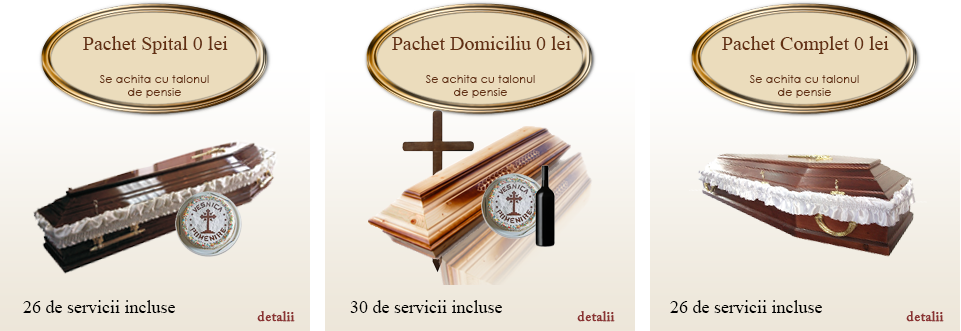
<style>
.page{position:relative;width:961px;height:331px}
.page>*{position:absolute;margin:0}
.t1{font:20px "TimesNewRomanPSMT";color:#633012}
.t2{font:11.3px "CenturyGothic";color:#633012}
.t3{font:18px "TimesNewRomanPSMT";color:#000000}
</style>
<div class="page">
<p class="t1" style="left:83px;top:36px;width:145px;height:18px">Pachet Spital 0 lei</p>
<p class="t1" style="left:392px;top:36px;width:179px;height:14px">Pachet Domiciliu 0 lei</p>
<p class="t1" style="left:722px;top:36px;width:167px;height:18px">Pachet Complet 0 lei</p>
<p class="t2" style="left:99px;top:75px;width:110px;height:23px;text-align:center">Se achita cu talonul<br>de pensie</p>
<p class="t2" style="left:425px;top:75px;width:110px;height:23px;text-align:center">Se achita cu talonul<br>de pensie</p>
<p class="t2" style="left:749px;top:75px;width:110px;height:23px;text-align:center">Se achita cu talonul<br>de pensie</p>
<p class="t3" style="left:23px;top:300px;width:152px;height:13px">26 de servicii incluse</p>
<p class="t3" style="left:350px;top:300px;width:152px;height:13px">30 de servicii incluse</p>
<p class="t3" style="left:670px;top:300px;width:152px;height:13px">26 de servicii incluse</p>
</div>
